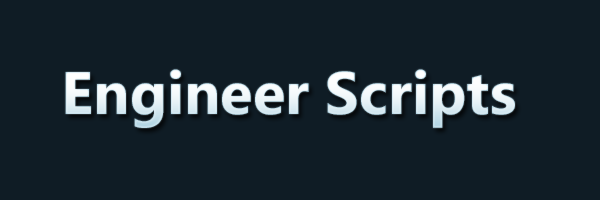
<style>
.page{position:relative;width:600px;height:200px;background:#0f1c25}
.page>*{position:absolute;margin:0}
.t1{font:60px "LeelawadeeUI-Bold";color:#e9f3f7}
</style>
<div class="page">
<p class="t1" style="left:65px;top:69px;width:450px;height:59px">Engineer Scripts</p>
</div>
